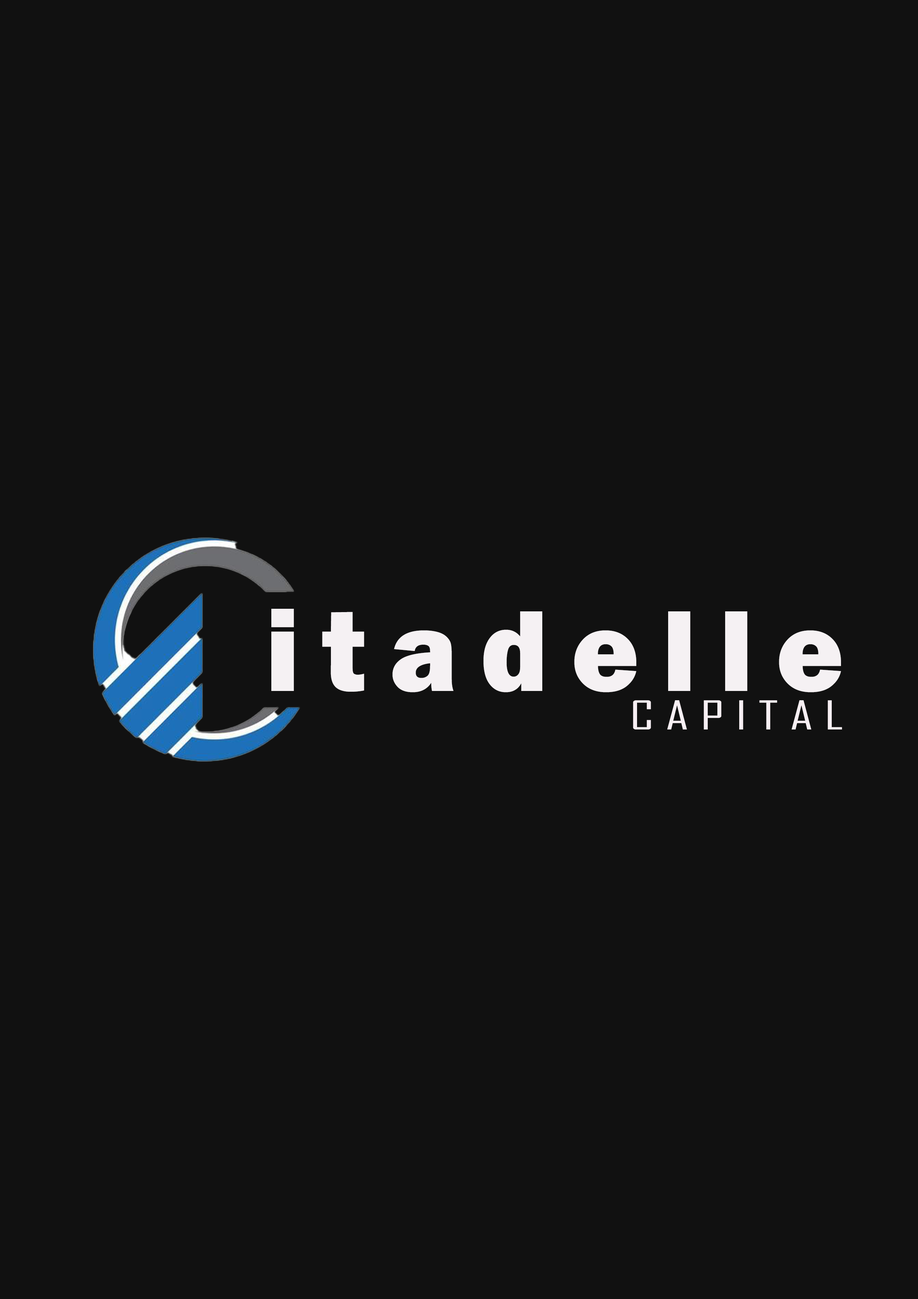
<style>
.page{position:relative;width:918px;height:1299px;background:#111111}
.page>*{position:absolute;margin:0}
.t1{font:119.5px "FranklinGothic-Heavy";letter-spacing:0.2em;color:#f5f1f3;scale:0.97 1}
.t2{font:38.1px "AgencyFB-Reg";letter-spacing:0.2em;color:#f7eff3;scale:1.51 1}
</style>
<div class="page">
<p class="t1" style="left:271px;top:609px;width:570px;height:83px">itadelle</p>
<p class="t2" style="left:633px;top:700px;width:209px;height:29px">CAPITAL</p>
</div>
